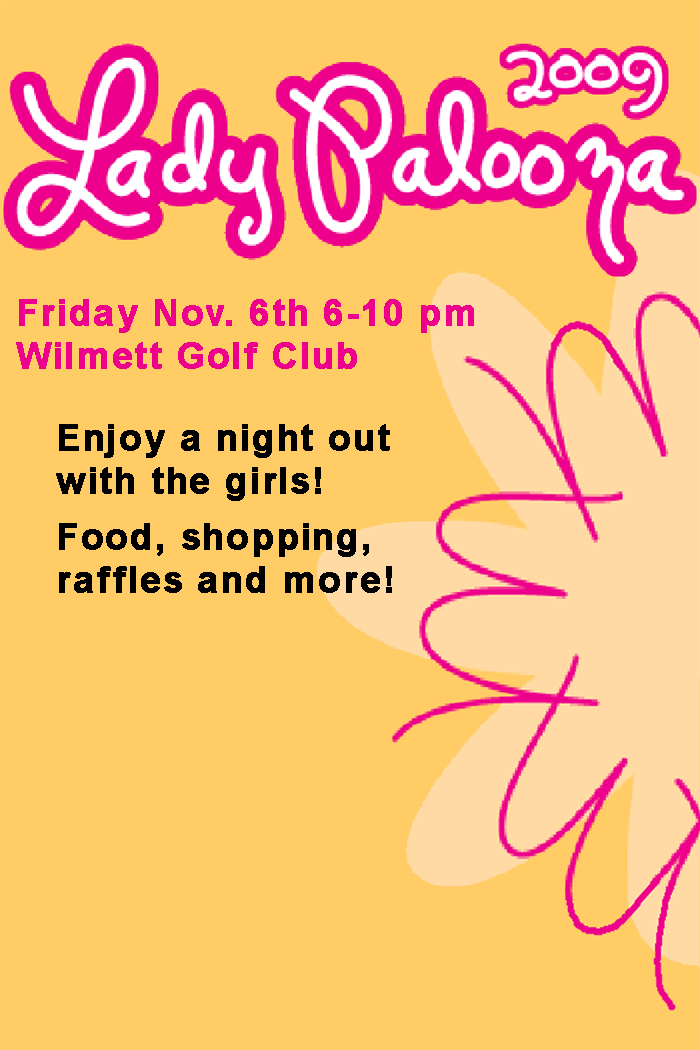
<style>
.page{position:relative;width:700px;height:1050px;background:#ffcc66}
.page>*{position:absolute;margin:0}
.t1{font:35.7px "Arial-BoldMT";letter-spacing:0.05em;color:#ed008c;font-weight:bold}
.t2{font:36px "Arial-BoldMT";letter-spacing:0.05em;color:#000000;font-weight:bold}
</style>
<div class="page">
<p class="t1" style="left:16px;top:299px;width:458px;height:70px">Friday Nov. 6th 6-10 pm<br>Wilmett Golf Club</p>
<p class="t2" style="left:56px;top:424px;width:336px;height:169px">Enjoy a night out<br>with the girls!<br><br>Food, shopping,<br>raffles and more!</p>
</div>
